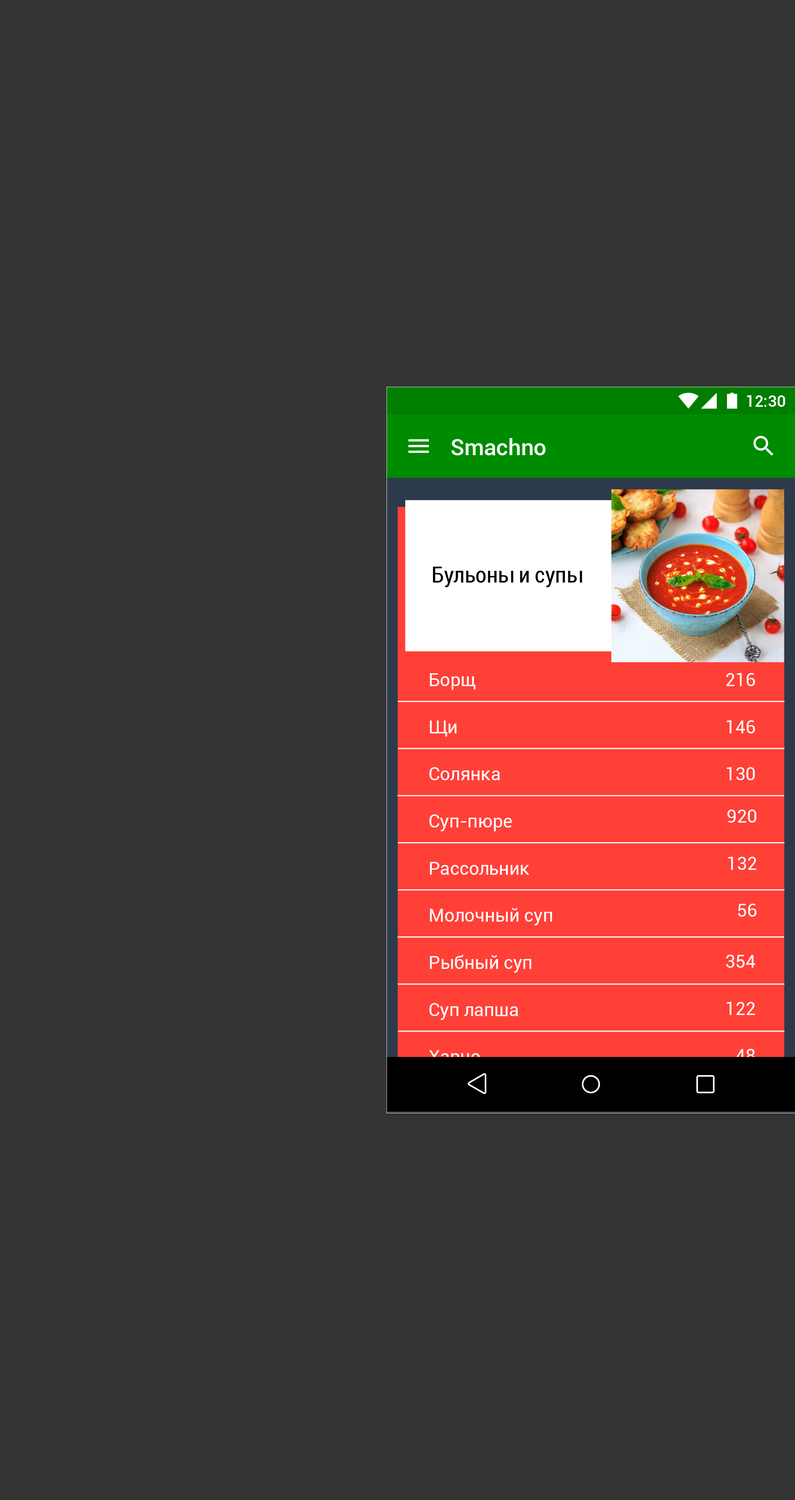
<style>
.page{position:relative;width:795px;height:1500px;background:#333333}
.page>*{position:absolute;margin:0}
.t1{font:15.9px "Roboto-Medium";color:#ffffff}
.t2{font:22.7px "Roboto-Medium";color:#ffffff}
.t3{font:22.7px "Roboto-Condensed";color:#000000}
.t4{font:18.1px "Roboto-Regular";color:#ffffff}
.t5{font:18.1px "Roboto-Regular"}
</style>
<div class="page">
<p class="t1" style="left:747px;top:395px;width:38px;height:12px">12:30</p>
<p class="t2" style="left:452px;top:438px;width:94px;height:17px">Smachno</p>
<p class="t3" style="left:433px;top:567px;width:149px;height:20px">Бульоны и супы</p>
<p class="t4" style="left:430px;top:673px;width:46px;height:17px">Борщ</p>
<p class="t4" style="left:726px;top:673px;width:29px;height:13px">216</p>
<p class="t4" style="left:430px;top:720px;width:27px;height:17px">Щи</p>
<p class="t4" style="left:727px;top:720px;width:28px;height:13px">146</p>
<p class="t4" style="left:429px;top:767px;width:71px;height:13px">Солянка</p>
<p class="t4" style="left:727px;top:767px;width:28px;height:13px">130</p>
<p class="t4" style="left:728px;top:809px;width:29px;height:13px">920</p>
<p class="t4" style="left:429px;top:814px;width:83px;height:17px">Суп-пюре</p>
<p class="t4" style="left:728px;top:856px;width:29px;height:14px">132</p>
<p class="t4" style="left:430px;top:862px;width:99px;height:13px">Рассольник</p>
<p class="t4" style="left:738px;top:903px;width:19px;height:13px">56</p>
<p class="t4" style="left:430px;top:908px;width:122px;height:17px">Молочный суп</p>
<p class="t4" style="left:430px;top:955px;width:101px;height:17px">Рыбный суп</p>
<p class="t4" style="left:726px;top:954px;width:29px;height:13px">354</p>
<p class="t4" style="left:727px;top:1002px;width:28px;height:13px">122</p>
<p class="t4" style="left:429px;top:1003px;width:89px;height:17px">Суп лапша</p>
<p class="t5" style="left:429px;top:1050px;width:51px;height:17px">Харчо</p>
<p class="t5" style="left:736px;top:1048px;width:19px;height:14px">48</p>
</div>
